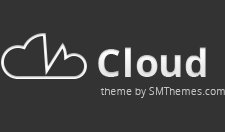
<style>
.page{position:relative;width:225px;height:132px;background:#333333}
.page>*{position:absolute;margin:0}
.t1{font:39.1px "OpenSans-Bold";color:#ffffff}
.t2{font:10.9px "OpenSans-Light";color:#c3c3c3;scale:0.97 1}
</style>
<div class="page">
<p class="t1" style="left:98px;top:47px;width:108px;height:30px">Cloud</p>
<p class="t2" style="left:100px;top:87px;width:125px;height:11px">theme by SMThemes.com</p>
</div>
